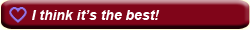
<style>
.page{position:relative;width:250px;height:30px;background:#800519}
.page>*{position:absolute;margin:0}
.t1{font:14px "Arial-BoldItalicMT";color:#ffffff}
</style>
<div class="page">
<p class="t1" style="left:32px;top:10px;width:128px;height:10px">I think it’s the best!</p>
</div>
